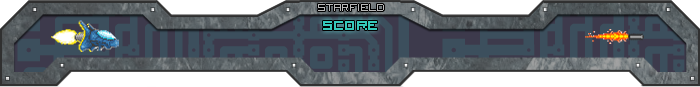
<style>
.page{position:relative;width:700px;height:87px}
.page>*{position:absolute;margin:0}
.t1{font:18.2px "VisitorTT2BRK";color:#b9b9b9}
.t2{font:24.3px "VisitorTT2BRK";color:#35cabb}
</style>
<div class="page">
<p class="t1" style="left:318px;top:4px;width:66px;height:7px">Starfield</p>
<p class="t2" style="left:323px;top:21px;width:54px;height:9px">Score</p>
</div>
